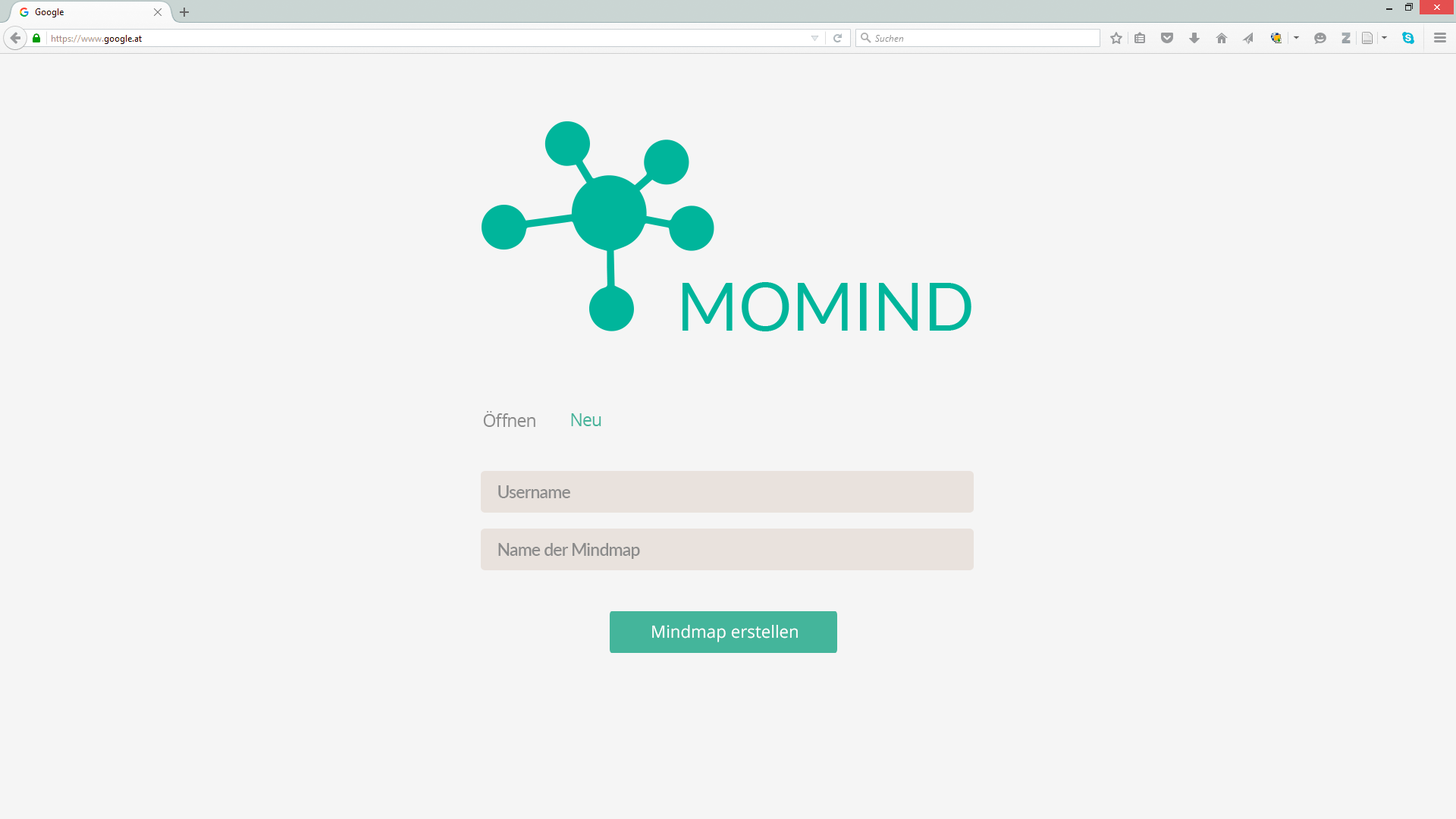
<style>
.page{position:relative;width:1456px;height:819px;background:#f5f5f5}
.page>*{position:absolute;margin:0}
.t1{font:17.1px "OpenSans";letter-spacing:-0.025em;color:#8c8c8c}
.t2{font:17.1px "OpenSans";letter-spacing:-0.025em;color:#46b49b}
.t3{font:17.1px "Lato-Semibold";letter-spacing:-0.025em;color:#8c8c8c}
.t4{font:17.1px "OpenSans";color:#ffffff}
</style>
<div class="page">
<p class="t1" style="left:483px;top:411px;width:52px;height:16px">Öffnen</p>
<p class="t2" style="left:571px;top:413px;width:30px;height:13px">Neu</p>
<p class="t3" style="left:498px;top:485px;width:72px;height:13px">Username</p>
<p class="t3" style="left:498px;top:543px;width:142px;height:16px">Name der Mindmap</p>
<p class="t4" style="left:652px;top:624px;width:146px;height:18px">Mindmap erstellen</p>
</div>
